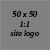
<style>
.page{position:relative;width:50px;height:50px;background:#808080}
.page>*{position:absolute;margin:0}
.t1{font:8px "Kandal-MediumItalic";color:#000000}
</style>
<div class="page">
<p class="t1" style="left:10px;top:11px;width:29px;height:27px;text-align:center">50 x 50<br>1:1<br>site logo</p>
</div>
